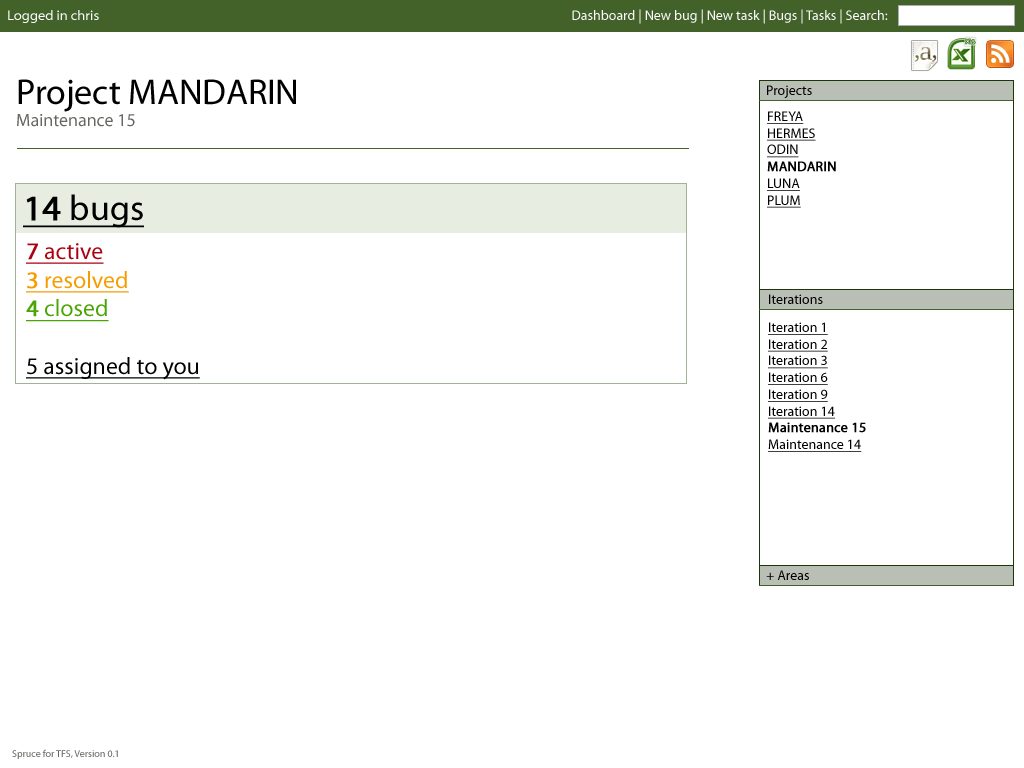
<style>
.page{position:relative;width:1024px;height:768px;background:#ffffff}
.page>*{position:absolute;margin:0}
.t1{font:13.9px "MyriadWebPro";color:#fcfcfe}
.t2{font:13.9px "MyriadPro-Regular";color:#fcfcfe}
.t3{font:35.9px "MyriadPro-Regular";color:#000000}
.t4{font:17.9px "MyriadPro-Regular";color:#646661}
.t5{font:13.9px "MyriadPro-Regular";color:#000000}
.t6{font:13.9px "MyriadPro-Regular";color:#000000;text-decoration:underline}
.t7{font:13.9px "MyriadPro-Regular";color:#000000;font-weight:bold}
.t8{font:35.9px "MyriadPro-Regular";color:#000000;text-decoration:underline}
.t9{font:35.9px "MyriadPro-Regular";color:#000000;font-weight:bold;text-decoration:underline}
.t10{font:23.9px "MyriadPro-Regular";color:#000000;text-decoration:underline}
.t11{font:23.9px "MyriadPro-Regular";color:#ab0111;font-weight:bold;text-decoration:underline}
.t12{font:23.9px "MyriadPro-Regular";color:#ab0111;text-decoration:underline}
.t13{font:23.9px "MyriadPro-Regular";color:#f59c00;font-weight:bold;text-decoration:underline}
.t14{font:23.9px "MyriadPro-Regular";color:#f59c00;text-decoration:underline}
.t15{font:23.9px "MyriadPro-Regular";color:#48a503;font-weight:bold;text-decoration:underline}
.t16{font:23.9px "MyriadPro-Regular";color:#48a503;text-decoration:underline}
.t17{font:10px "MyriadPro-Regular";color:#646661}
</style>
<div class="page">
<p class="t1" style="left:8px;top:10px;width:91px;height:13px">Logged in chris</p>
<p class="t2" style="left:572px;top:9px;width:316px;height:15px">Dashboard | New bug | New task | Bugs | Tasks | Search:</p>
<p class="t3" style="left:17px;top:79px;width:279px;height:48px">Project MANDARIN<br><span class="t4">Maintenance 15</span></p>
<p class="t5" style="left:767px;top:85px;width:45px;height:13px">Projects</p>
<p class="t6" style="left:767px;top:111px;width:69px;height:97px">FREYA<br>HERMES<br>ODIN<br><span class="t7">MANDARIN<br></span>LUNA<br>PLUM</p>
<p class="t8" style="left:23px;top:194px;width:121px;height:34px"><span class="t9">14</span> bugs</p>
<p class="t10" style="left:26px;top:243px;width:174px;height:137px"><span class="t11">7</span><span class="t12"> active<br></span><span class="t13">3</span><span class="t14"> resolved<br></span><span class="t15">4</span><span class="t16"> closed<br><br></span>5 assigned to you</p>
<p class="t5" style="left:769px;top:294px;width:54px;height:10px">Iterations</p>
<p class="t6" style="left:768px;top:322px;width:98px;height:130px">Iteration 1<br>Iteration 2<br>Iteration 3<br>Iteration 6<br>Iteration 9<br>Iteration 14<br><span class="t7">Maintenance 15<br></span>Maintenance 14</p>
<p class="t5" style="left:766px;top:570px;width:43px;height:10px">+ Areas</p>
<p class="t17" style="left:12px;top:749px;width:106px;height:10px">Spruce for TFS, Version 0.1</p>
</div>
